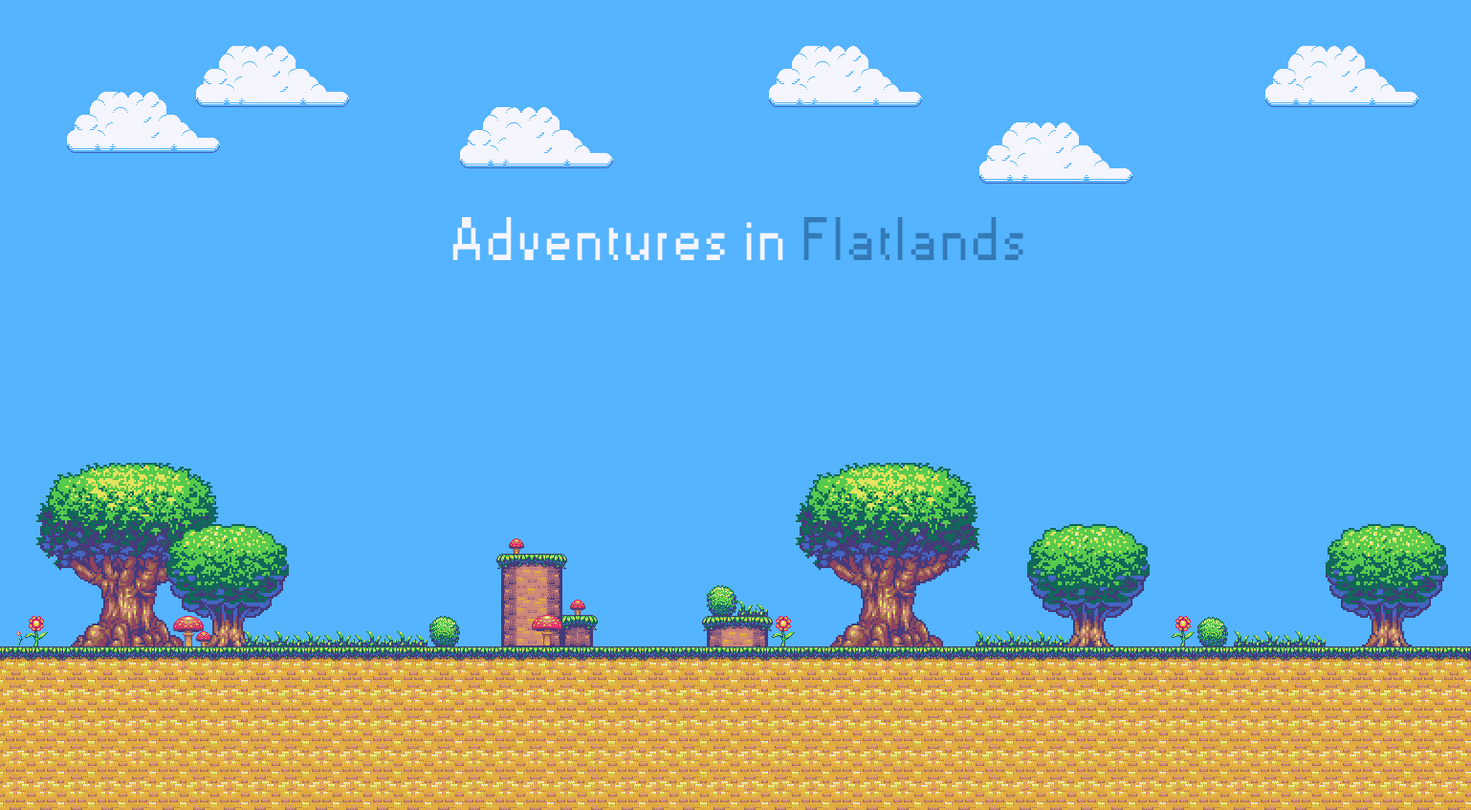
<style>
.page{position:relative;width:1471px;height:810px;background:#55b4ff}
.page>*{position:absolute;margin:0}
.t1{font:57.4px "Small Fonts";letter-spacing:0.075em;color:#f5f5ff}
.t2{font:57.4px "Small Fonts";letter-spacing:0.075em;color:#337ab7}
</style>
<div class="page">
<p class="t1" style="left:453px;top:217px;width:571px;height:43px">Adventures in <span class="t2">Flatlands</span></p>
</div>
